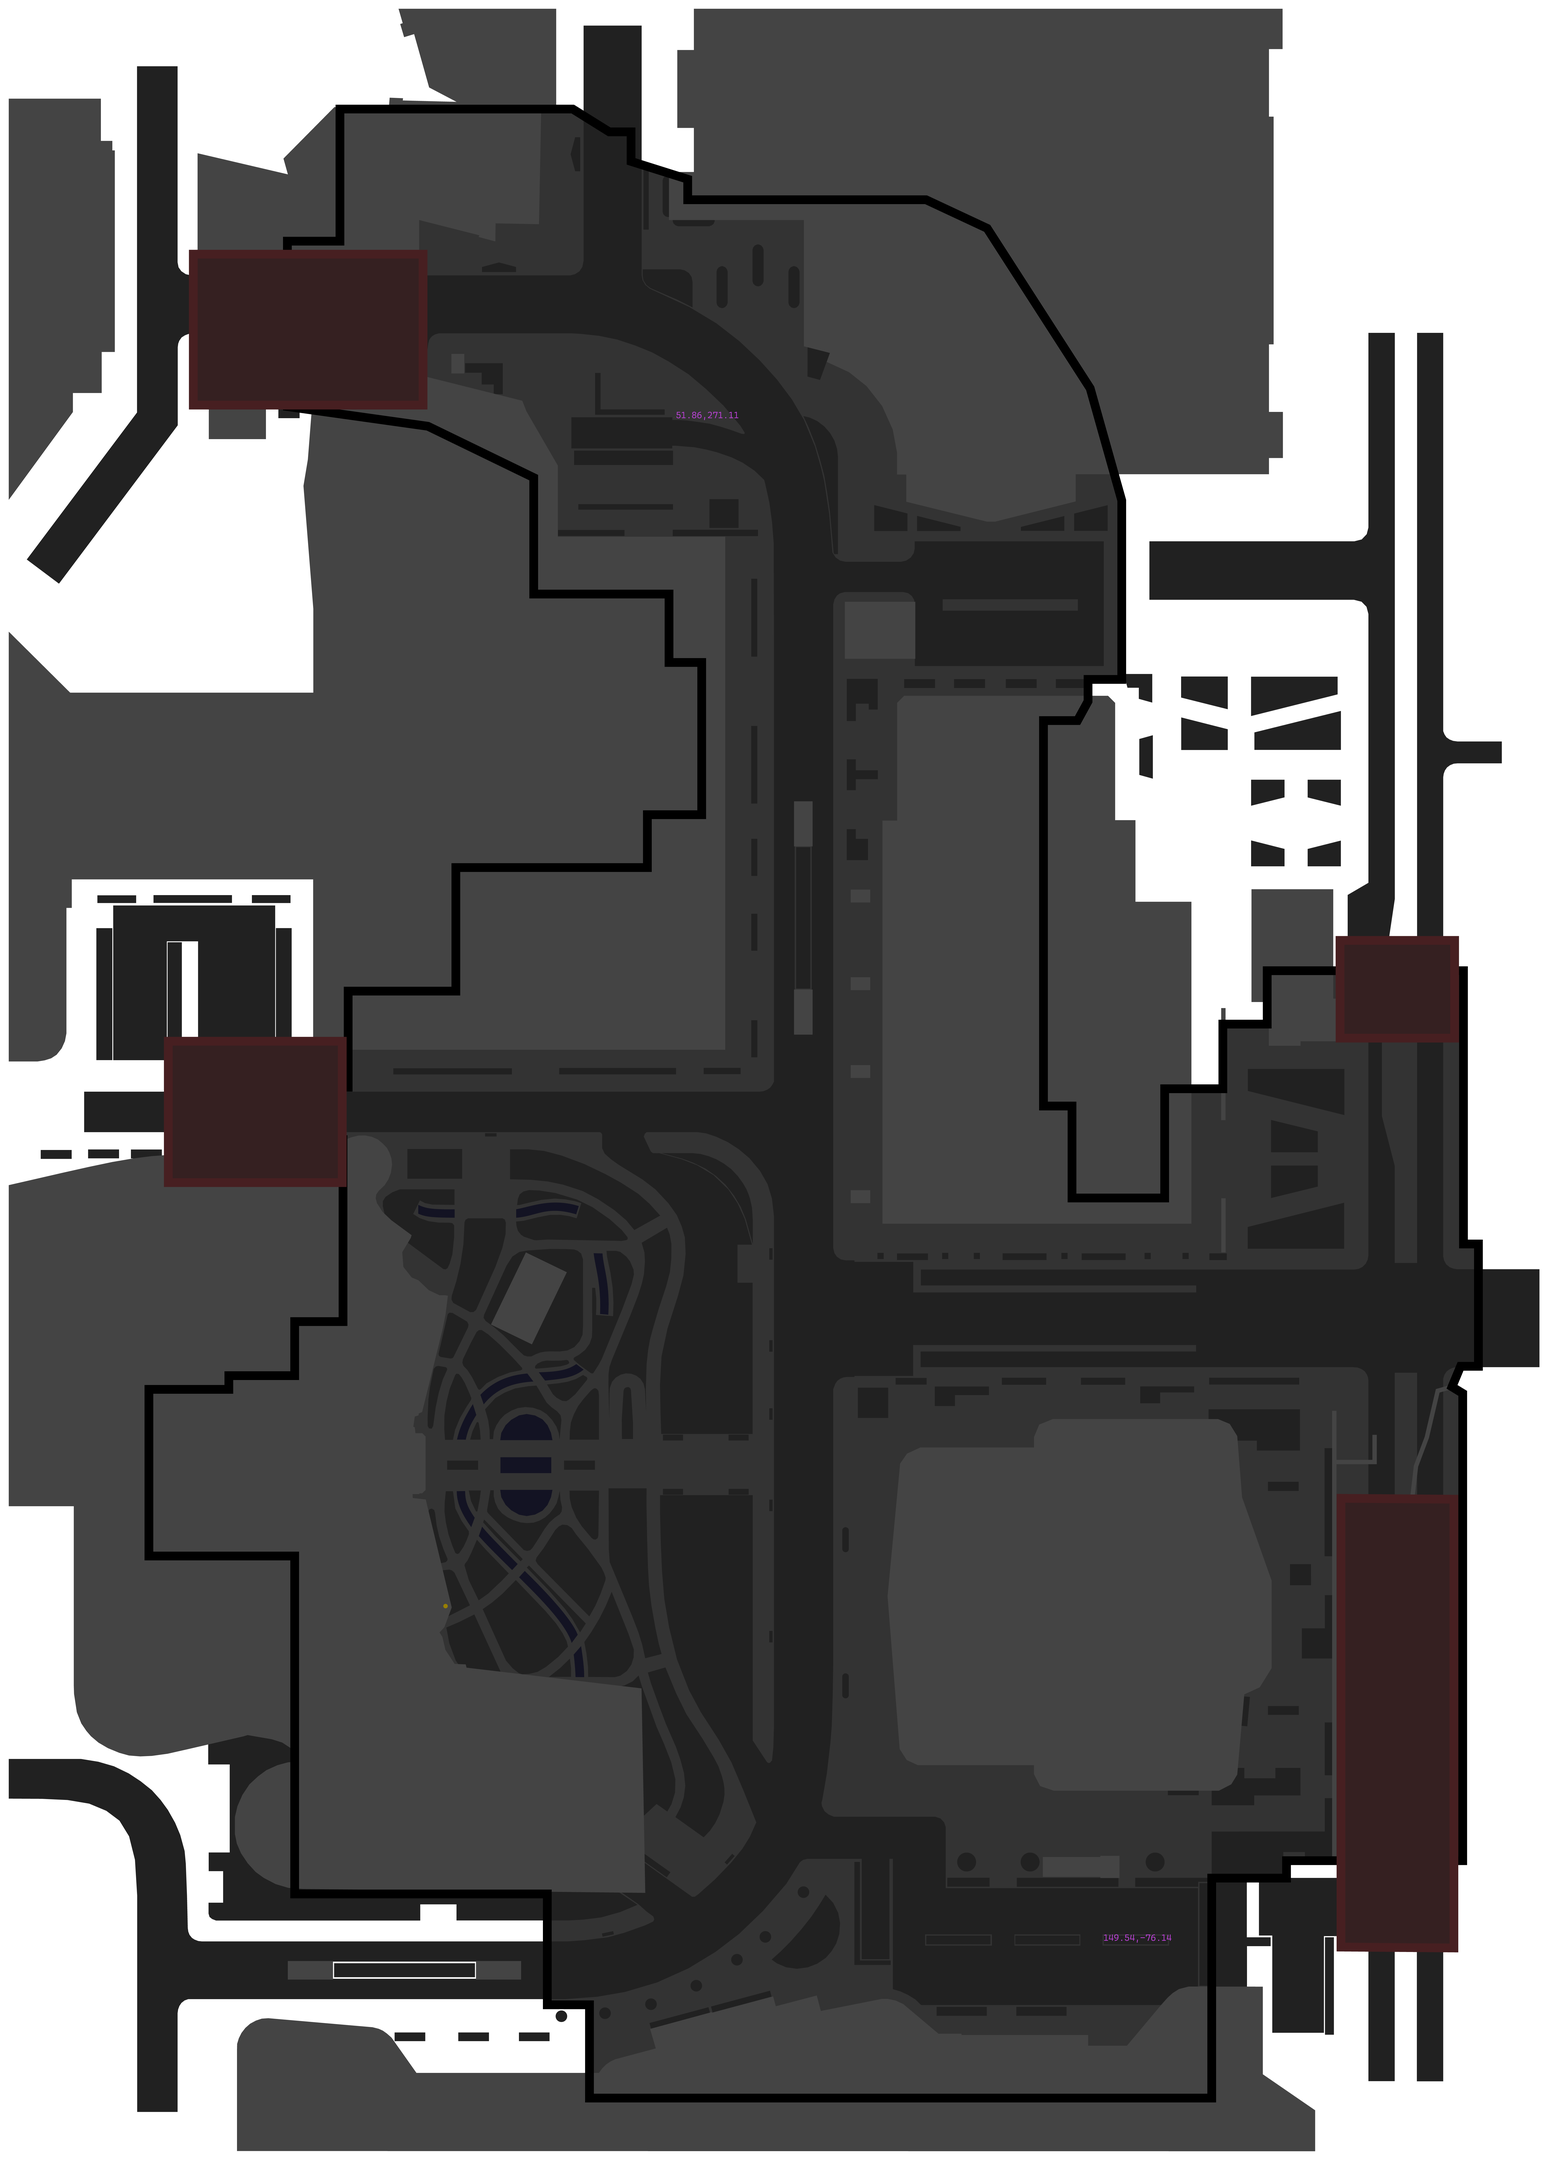
<style>
.page{position:relative;width:1546px;height:2160px;background:#444444}
.page>*{position:absolute;margin:0}
.t1{font:9px "CascadiaMonoRoman-SemiLight";color:#bb42d6}
</style>
<div class="page">
<p class="t1" style="left:676px;top:412px;width:62px;height:8px">51.86,271.11</p>
<p class="t1" style="left:1104px;top:1934px;width:67px;height:9px">149.54,-76.14</p>
</div>
